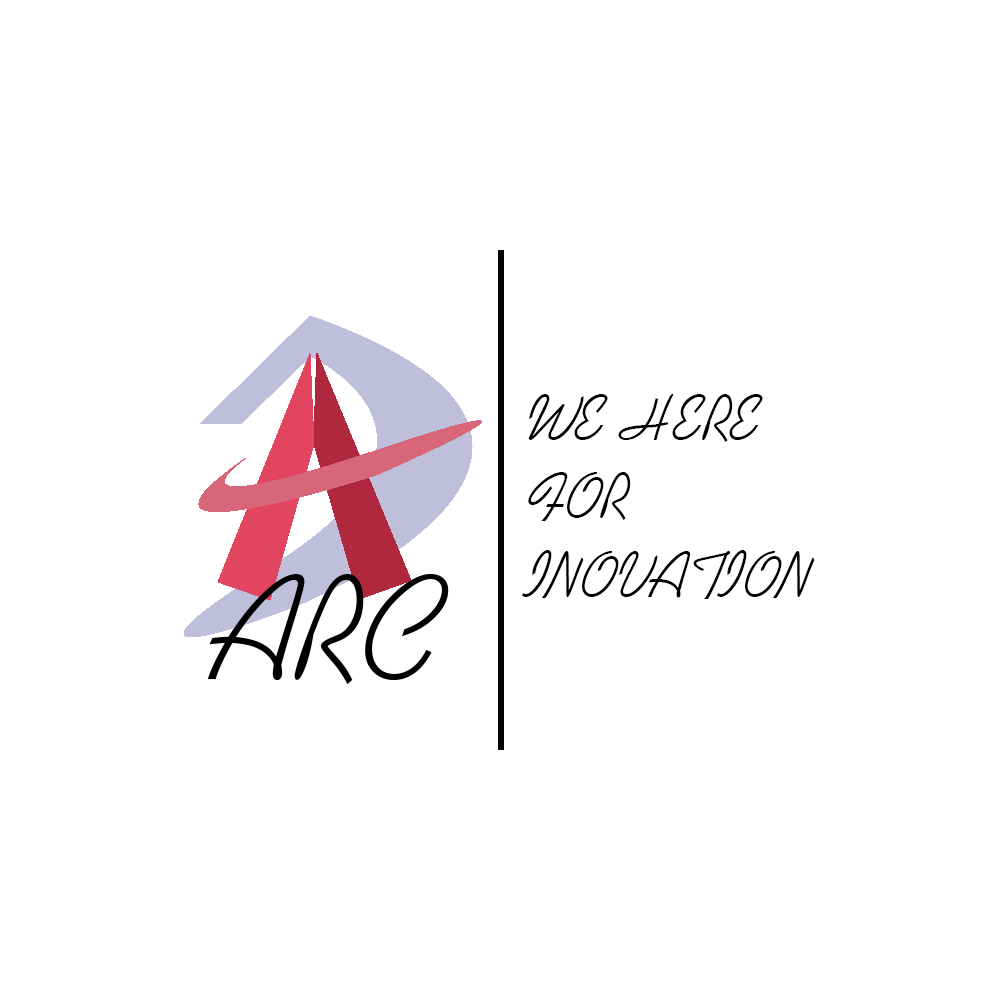
<style>
.page{position:relative;width:1000px;height:1000px;background:#ffffff}
.page>*{position:absolute;margin:0}
.t1{font:65.7px "KaufmannBT-Regular";color:#000000}
.t2{font:65.7px "KaufmannBT-Regular"}
</style>
<div class="page">
<p class="t1" style="left:521px;top:394px;width:294px;height:205px">WE HERE<br>FOR <br>INOVATION</p>
<p class="t2" style="left:523px;top:394px;width:294px;height:205px">WE HERE<br>FOR <br>INOVATION</p>
</div>
